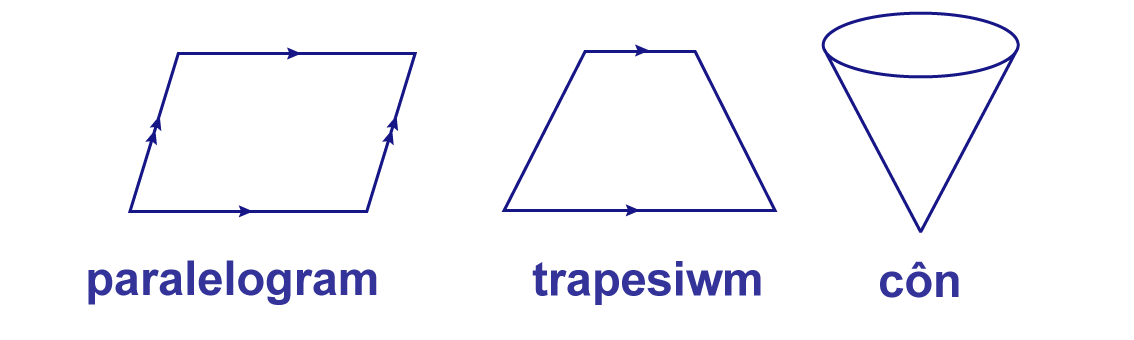
<style>
.page{position:relative;width:1134px;height:340px;background:#ffffff}
.page>*{position:absolute;margin:0}
.t1{font:48px "Arial-BoldMT";color:#333399}
</style>
<div class="page">
<p class="t1" style="left:88px;top:260px;width:289px;height:45px">paralelogram</p>
<p class="t1" style="left:532px;top:261px;width:229px;height:44px">trapesiwm</p>
<p class="t1" style="left:880px;top:261px;width:79px;height:37px">côn</p>
</div>
